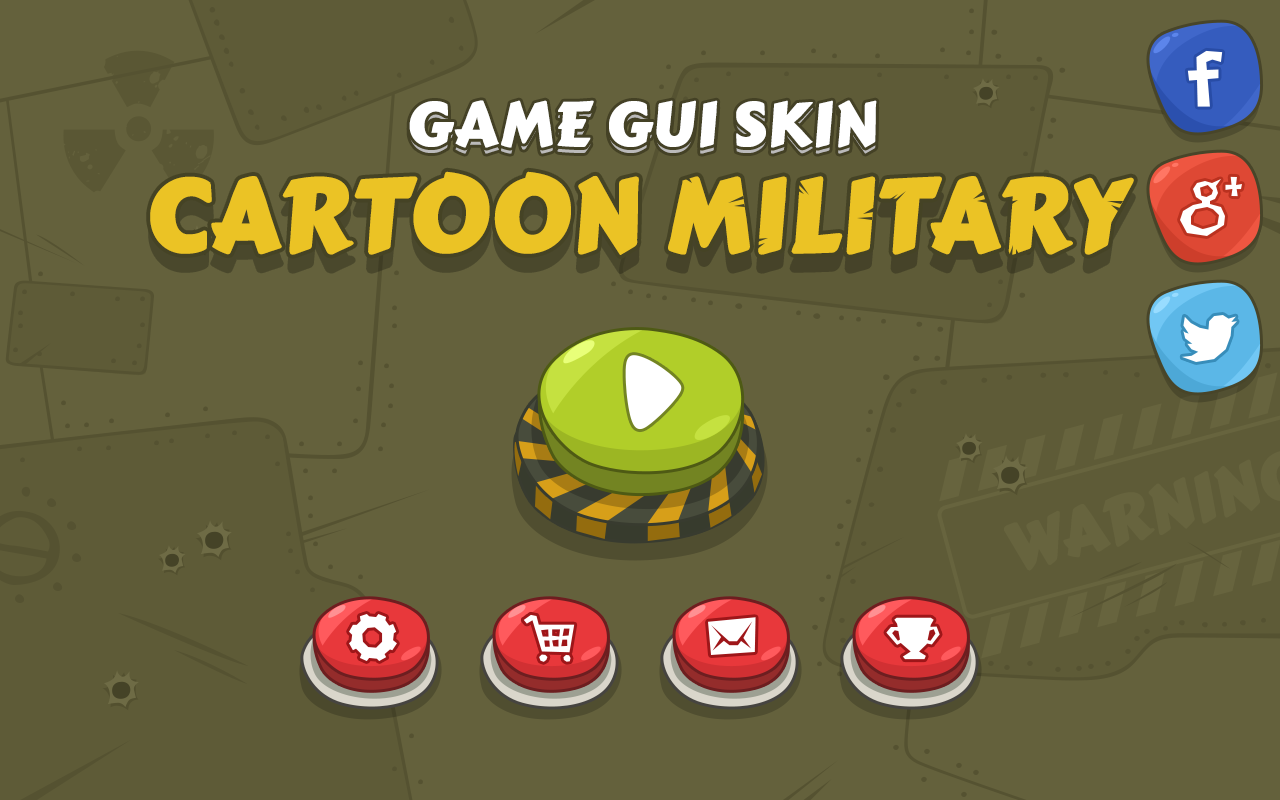
<style>
.page{position:relative;width:1280px;height:800px;background:#64613c}
.page>*{position:absolute;margin:0}
.t1{font:61.8px "CarterOne";letter-spacing:-0.025em;color:#ffffff;text-transform:uppercase;font-weight:bold;scale:1.05 1}
.t2{font:100px "CarterOne";color:#ebc325;text-transform:uppercase;font-weight:bold}
</style>
<div class="page">
<p class="t1" style="left:409px;top:100px;width:468px;height:48px">Game GUI sKIN</p>
<p class="t1" style="left:409px;top:106px;width:468px;height:48px">Game GUI sKIN</p>
<p class="t2" style="left:150px;top:171px;width:984px;height:84px">CARTOON MILITARY</p>
</div>
